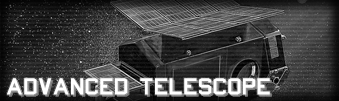
<style>
.page{position:relative;width:339px;height:101px}
.page>*{position:absolute;margin:0}
.t1{font:20px "ACES_MIL-STD-2161C";color:#ffffff}
</style>
<div class="page">
<p class="t1" style="left:7px;top:78px;width:263px;height:17px">Advanced telescope</p>
</div>
